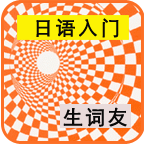
<style>
.page{position:relative;width:144px;height:144px}
.page>*{position:absolute;margin:0}
.t1{font:19.9px "STXihei";letter-spacing:0.1em;color:#090909;font-weight:bold}
</style>
<div class="page">
<p class="t1" style="left:36px;top:18px;width:83px;height:20px">日语入门</p>
<p class="t1" style="left:63px;top:107px;width:64px;height:20px">生词友</p>
</div>
